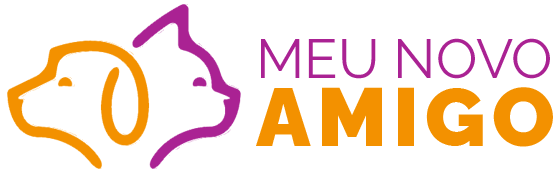
<style>
.page{position:relative;width:558px;height:173px;background:#ffffff}
.page>*{position:absolute;margin:0}
.t1{font:55px/63px "Raleway-Regular";color:#aa2293}
.t2{font:82px/68px "Raleway-Black";letter-spacing:0.074em;color:#f39100}
</style>
<div class="page">
<p class="t1" style="left:256px;top:38px;width:297px;height:109px">MEU NOVO<br><span class="t2">AMIGO</span></p>
</div>
